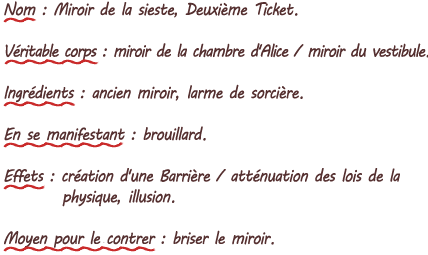
<style>
.page{position:relative;width:428px;height:255px;background:#ffffff}
.page>*{position:absolute;margin:0}
.t1{font:17.3px "MVBoli";letter-spacing:-0.05em;color:#553030;scale:0.9 1}
.t2{font:17.3px "MVBoli";letter-spacing:-0.07em;color:#553030;scale:0.9 1}
</style>
<div class="page">
<p class="t1" style="left:4px;top:1px;width:425px;height:247px">Nom : Miroir de la sieste, Deuxième Ticket.<br><br><span class="t2">Véritable corps : miroir de la chambre d'Alice / miroir du vestibule.<br></span><br>Ingrédients : ancien miroir, larme de sorcière.<br><br>En se manifestant : brouillard.<br><br>Effets : création d'une Barrière / atténuation des lois de la<br>         physique, illusion.<br><br>Moyen pour le contrer : briser le miroir.</p>
</div>
